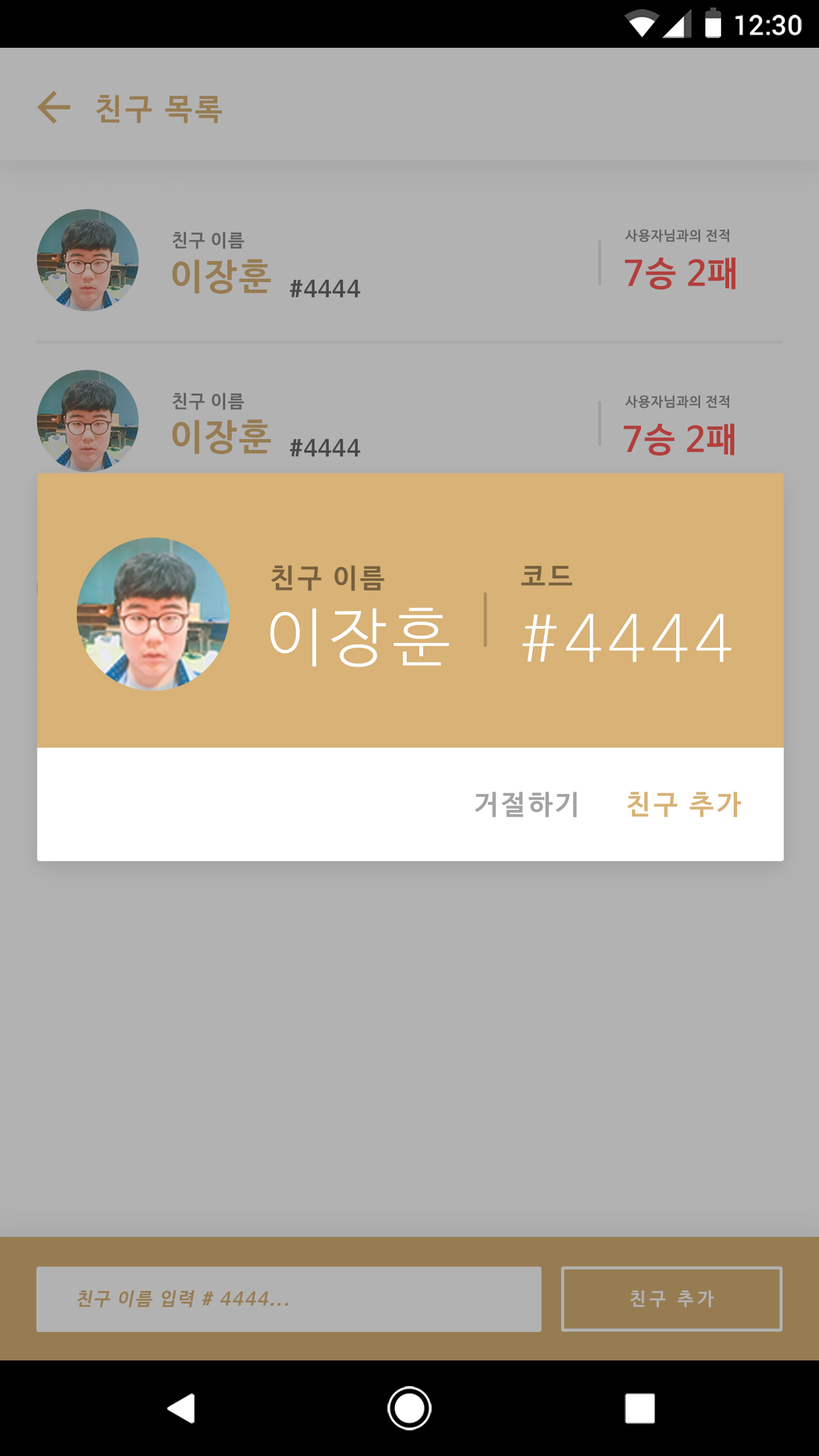
<style>
.page{position:relative;width:819px;height:1456px;background:#b2b2b2}
.page>*{position:absolute;margin:0}
.t1{font:27.3px "Roboto-Medium";color:#ffffff}
.t2{font:30.3px "NanumBarunGothicBold";letter-spacing:0.1em;color:#977c52}
.t3{font:18.2px "NanumBarunGothicBold";letter-spacing:0.05em;color:#626262}
.t4{font:13.6px "NanumBarunGothicBold";letter-spacing:0.05em;color:#626262}
.t5{font:34.1px "NanumBarunGothicBold";letter-spacing:0.05em;color:#b23e3b}
.t6{font:36.5px "NanumBarunGothicBold";letter-spacing:0.05em;color:#977c52}
.t7{font:22.7px "NanumBarunGothicBold";letter-spacing:0.05em;color:#484848}
.t8{font:27.3px "NanumBarunGothicBold";letter-spacing:0.1em;color:#76603e}
.t9{font:63.7px "NanumBarunGothicLight";letter-spacing:0.1em;color:#fefefe}
.t10{font:27.3px "NanumBarunGothicBold";letter-spacing:0.1em;color:#a3a3a3}
.t11{font:27.3px "NanumBarunGothicBold";letter-spacing:0.1em;color:#d8b276}
.t12{font:18.2px "NanumBarunGothicBold";letter-spacing:0.1em;color:#977c52;font-style:italic}
.t13{font:18.2px "NanumBarunGothicBold";letter-spacing:0.2em;color:#b2b2b2}
</style>
<div class="page">
<p class="t1" style="left:735px;top:15px;width:67px;height:21px">12:30</p>
<p class="t2" style="left:96px;top:95px;width:126px;height:28px">친구 목록</p>
<p class="t3" style="left:172px;top:231px;width:72px;height:18px">친구 이름</p>
<p class="t4" style="left:625px;top:229px;width:104px;height:13px">사용자님과의 전적</p>
<p class="t5" style="left:624px;top:257px;width:111px;height:32px">7승 2패</p>
<p class="t6" style="left:172px;top:259px;width:99px;height:35px">이장훈</p>
<p class="t7" style="left:289px;top:279px;width:72px;height:18px">#4444</p>
<p class="t3" style="left:172px;top:392px;width:72px;height:18px">친구 이름</p>
<p class="t4" style="left:625px;top:395px;width:104px;height:13px">사용자님과의 전적</p>
<p class="t6" style="left:172px;top:419px;width:99px;height:35px">이장훈</p>
<p class="t5" style="left:623px;top:423px;width:111px;height:33px">7승 2패</p>
<p class="t7" style="left:289px;top:439px;width:72px;height:18px">#4444</p>
<p class="t8" style="left:271px;top:565px;width:113px;height:26px">친구 이름</p>
<p class="t8" style="left:521px;top:566px;width:51px;height:20px">코드</p>
<p class="t9" style="left:270px;top:607px;width:179px;height:60px">이장훈</p>
<p class="t9" style="left:522px;top:614px;width:209px;height:48px">#4444</p>
<p class="t10" style="left:474px;top:792px;width:103px;height:25px">거절하기</p>
<p class="t11" style="left:627px;top:792px;width:114px;height:25px">친구 추가</p>
<p class="t12" style="left:77px;top:1290px;width:211px;height:18px">친구 이름 입력 # 4444...</p>
<p class="t13" style="left:630px;top:1290px;width:84px;height:18px">친구 추가</p>
</div>
